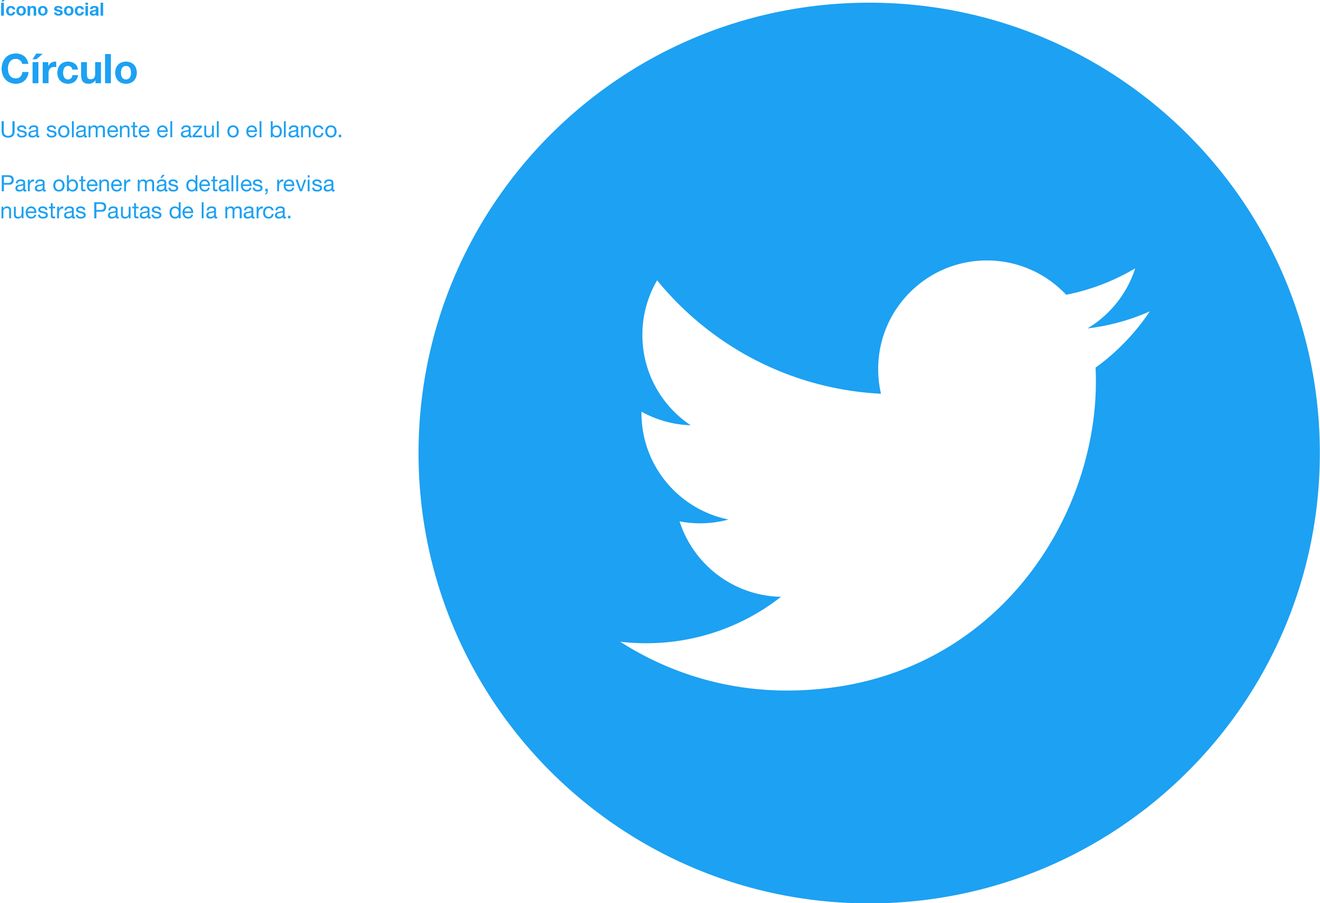
<style>
.page{position:relative;width:1320px;height:903px;background:#ffffff}
.page>*{position:absolute;margin:0}
.t1{font:22.5px "HelveticaNeue";color:#1da1f2}
.t2{font:18px/40.6px "HelveticaNeue-Bold";color:#1da1f2}
.t3{font:40.6px/40.6px "HelveticaNeue-Bold";color:#1da1f2}
</style>
<div class="page">
<p class="t1" style="left:1px;top:0px;width:340px;height:219px"><span class="t2">Ícono social<br><br></span><span class="t3">Círculo<br></span><br>Usa solamente el azul o el blanco.<br><br>Para obtener más detalles, revisa nuestras Pautas de la marca.</p>
</div>
